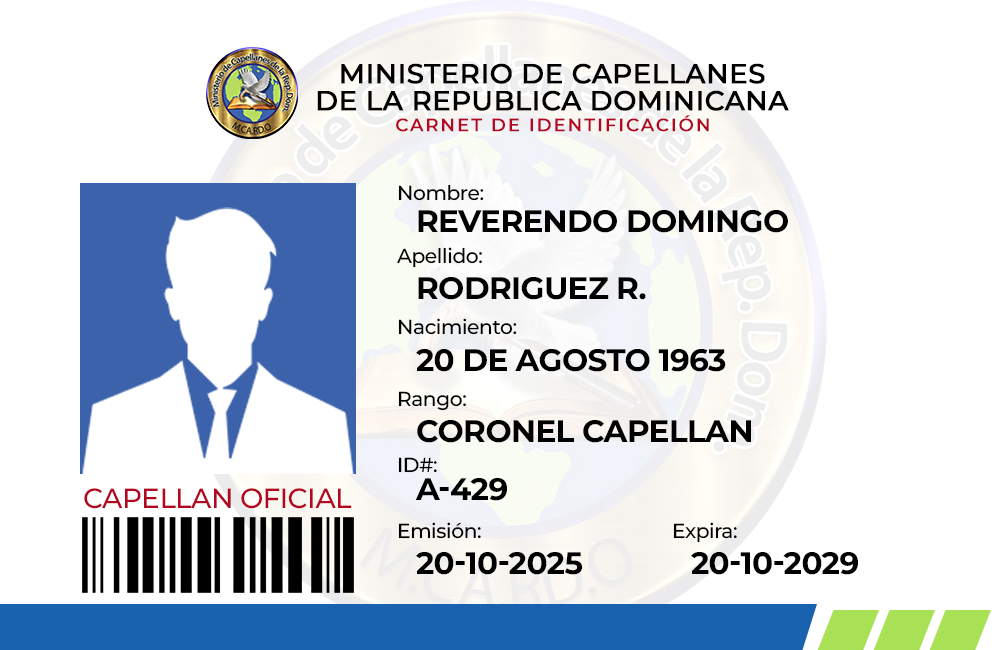
<style>
.page{position:relative;width:1004px;height:650px;background:#ffffff}
.page>*{position:absolute;margin:0}
.t1{font:27.3px/27.6px "Montserrat-Medium";color:#000000;text-transform:uppercase;font-weight:bold}
.t2{font:17.7px "Montserrat-Medium";letter-spacing:0.1em;color:#b30620;text-transform:uppercase;font-weight:bold}
.t3{font:20.2px "Montserrat-Medium";letter-spacing:-0.02em;color:#000000}
.t4{font:31px "Montserrat-Bold";letter-spacing:-0.02em;color:#000000}
.t5{font:31px "Montserrat-Bold";letter-spacing:-0.02em;color:#000000;text-transform:uppercase}
.t6{font:27.8px "Montserrat-Medium";letter-spacing:-0.02em;color:#b30620}
</style>
<div class="page">
<p class="t1" style="left:317px;top:63px;width:472px;height:48px;text-align:center">Ministerio de Capellanes<br>de la Republica Dominicana</p>
<p class="t2" style="left:396px;top:115px;width:313px;height:17px">carnet de identificación</p>
<p class="t3" style="left:398px;top:184px;width:86px;height:17px">Nombre:</p>
<p class="t4" style="left:418px;top:210px;width:370px;height:23px">REVERENDO DOMINGO</p>
<p class="t3" style="left:397px;top:247px;width:85px;height:21px">Apellido:</p>
<p class="t4" style="left:418px;top:277px;width:228px;height:23px">RODRIGUEZ R.</p>
<p class="t3" style="left:398px;top:318px;width:119px;height:17px">Nacimiento:</p>
<p class="t5" style="left:416px;top:349px;width:310px;height:23px">20 de Agosto 1963</p>
<p class="t3" style="left:398px;top:391px;width:68px;height:20px">Rango:</p>
<p class="t5" style="left:417px;top:420px;width:334px;height:23px">Coronel capellan</p>
<p class="t3" style="left:398px;top:457px;width:39px;height:16px">ID#:</p>
<p class="t5" style="left:415px;top:478px;width:92px;height:23px">a-429</p>
<p class="t6" style="left:84px;top:488px;width:268px;height:21px">CAPELLAN OFICIAL</p>
<p class="t3" style="left:398px;top:522px;width:83px;height:17px">Emisión:</p>
<p class="t3" style="left:673px;top:522px;width:64px;height:21px">Expira:</p>
<p class="t5" style="left:416px;top:552px;width:167px;height:23px">20-10-2025</p>
<p class="t5" style="left:691px;top:552px;width:167px;height:23px">20-10-2029</p>
</div>
